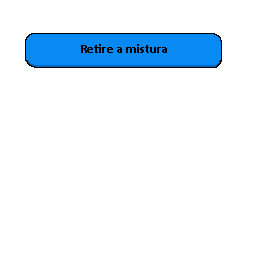
<style>
.page{position:relative;width:256px;height:256px;background:#ffffff}
.page>*{position:absolute;margin:0}
.t1{font:12.5px "Calibri-Bold";color:#000000}
</style>
<div class="page">
<p class="t1" style="left:81px;top:44px;width:86px;height:9px">Retire a mistura</p>
</div>
